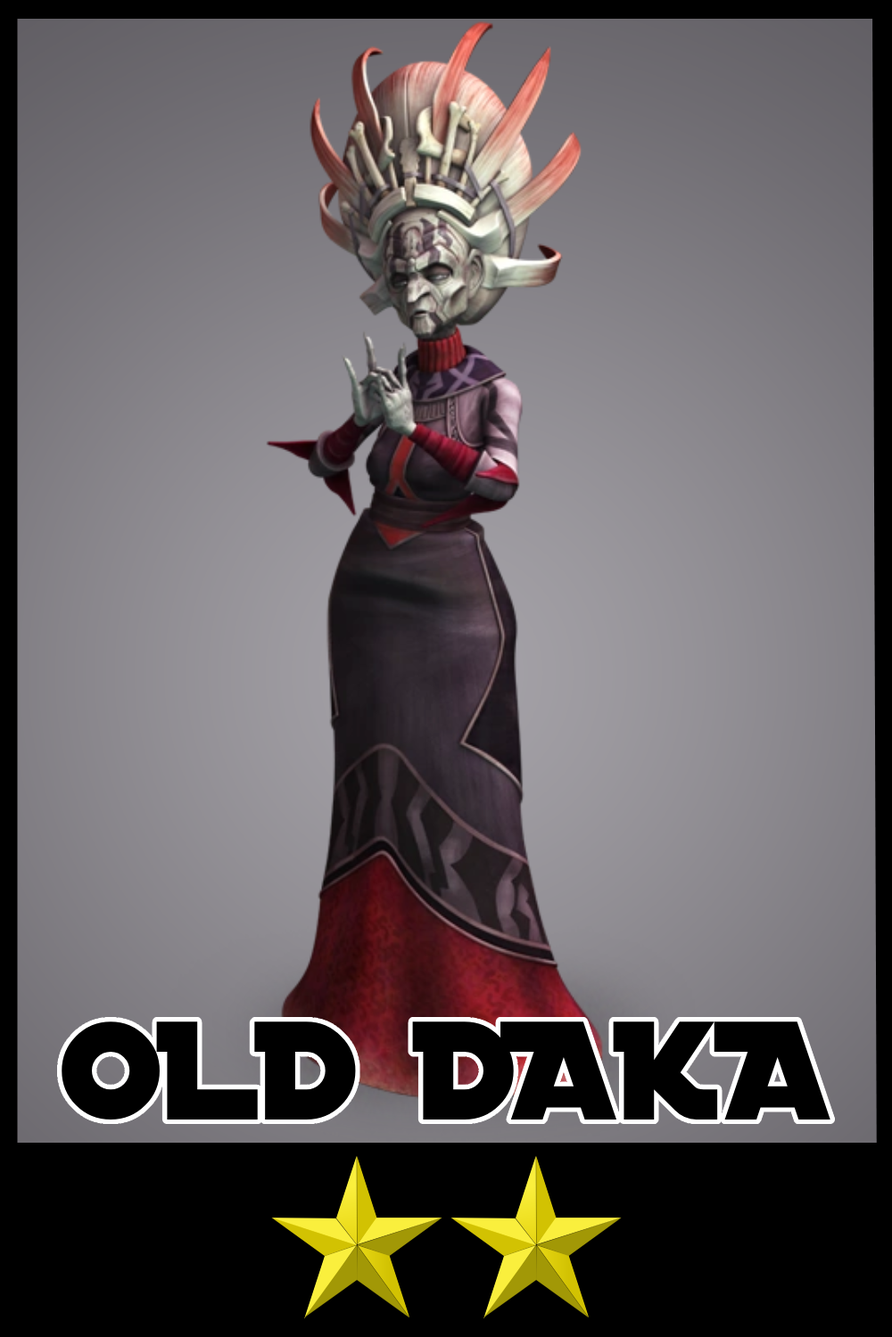
<style>
.page{position:relative;width:892px;height:1337px}
.page>*{position:absolute;margin:0}
.t1{font:150.5px "DistantGalaxy";color:#000000}
</style>
<div class="page">
<p class="t1" style="left:62px;top:1022px;width:768px;height:98px">OLD DAKA</p>
</div>
